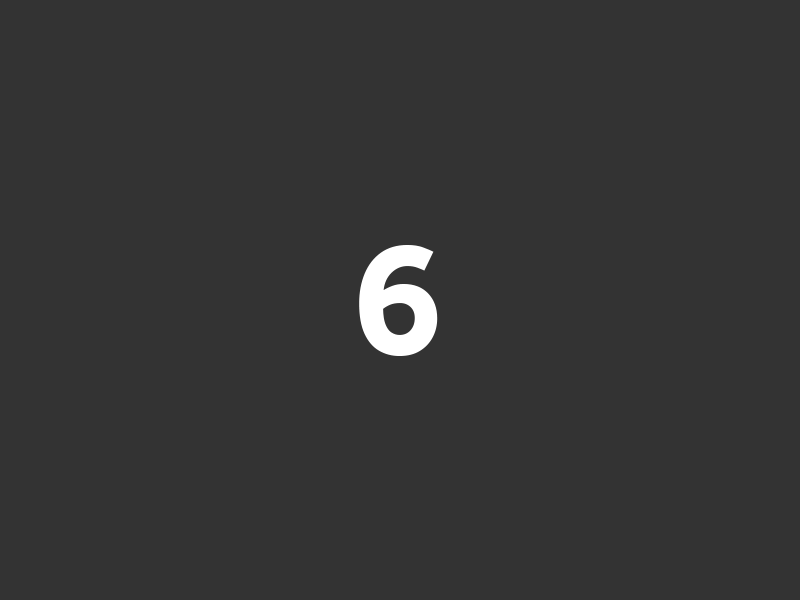
<style>
.page{position:relative;width:800px;height:600px;background:#333333}
.page>*{position:absolute;margin:0}
.t1{font:166.7px "Effra-Bold";color:#ffffff}
</style>
<div class="page">
<p class="t1" style="left:359px;top:245px;width:79px;height:111px">6</p>
</div>
